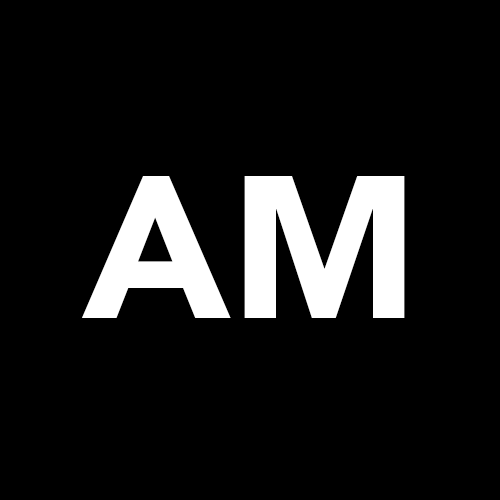
<style>
.page{position:relative;width:500px;height:500px;background:#000000}
.page>*{position:absolute;margin:0}
.t1{font:200px "AvenirLTStd-Black";color:#ffffff}
</style>
<div class="page">
<p class="t1" style="left:82px;top:176px;width:323px;height:142px">AM</p>
</div>
